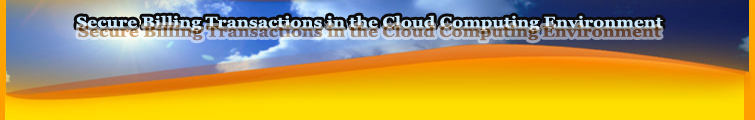
<style>
.page{position:relative;width:755px;height:120px}
.page>*{position:absolute;margin:0}
.t1{font:15.3px "Georgia-Bold";color:#c9e8fd;scale:1.14 1}
.t2{font:15.3px "Georgia-Bold";scale:1.13 1}
</style>
<div class="page">
<p class="t1" style="left:76px;top:15px;width:587px;height:16px">Secure Billing Transactions in the Cloud Computing Environment</p>
<p class="t2" style="left:78px;top:25px;width:583px;height:16px">Secure Billing Transactions in the Cloud Computing Environment</p>
</div>
